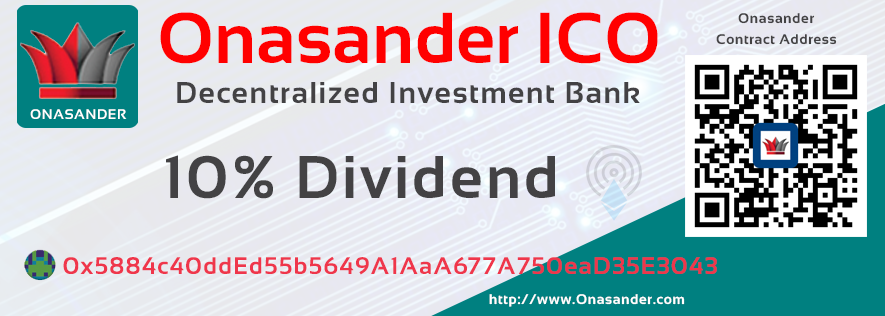
<style>
.page{position:relative;width:885px;height:316px}
.page>*{position:absolute;margin:0}
.t1{font:72px "Sansation-Bold";color:#ff0000}
.t2{font:14px "Sansation-Bold";letter-spacing:0.05em;color:#434244}
.t3{font:30px "Sansation-Bold";letter-spacing:0.05em;color:#434244}
.t4{font:60px "Sansation-Bold";letter-spacing:0.05em;color:#434244}
.t5{font:24px "Sansation-Bold";letter-spacing:0.05em;color:#ef364b}
.t6{font:14px "Sansation-Bold";letter-spacing:0.05em;color:#ffffff}
</style>
<div class="page">
<p class="t1" style="left:160px;top:12px;width:498px;height:52px">Onasander ICO</p>
<p class="t2" style="left:738px;top:13px;width:77px;height:11px">Onasander</p>
<p class="t2" style="left:716px;top:34px;width:121px;height:11px">Contract Address</p>
<p class="t3" style="left:177px;top:82px;width:463px;height:22px">Decentralized Investment Bank</p>
<p class="t4" style="left:166px;top:155px;width:389px;height:44px">10% Dividend</p>
<p class="t5" style="left:63px;top:256px;width:654px;height:19px">0x5884c40ddEd55b5649A1AaA677A750eaD35E3043</p>
<p class="t6" style="left:489px;top:294px;width:196px;height:13px">http://www.Onasander.com</p>
</div>
